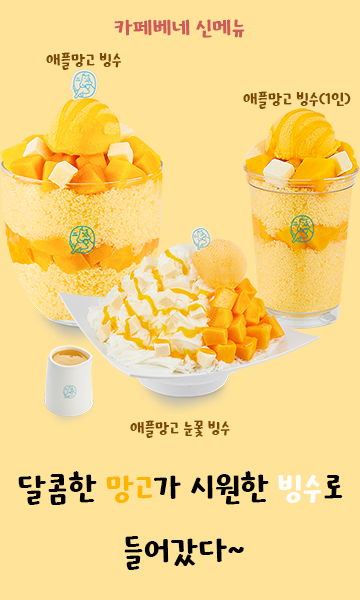
<style>
.page{position:relative;width:360px;height:600px;background:#ffe399}
.page>*{position:absolute;margin:0}
.t1{font:24px "KOTRA-HOPE";color:#ce5a5a}
.t2{font:18px "KOTRA-HOPE";color:#7b4a01}
.t3{font:36px "KOTRA-HOPE";color:#000000}
.t4{font:36px "KOTRA-HOPE";color:#ffb500}
.t5{font:36px "KOTRA-HOPE";color:#ffffff}
</style>
<div class="page">
<p class="t1" style="left:114px;top:19px;width:131px;height:19px">카페베네 신메뉴</p>
<p class="t2" style="left:46px;top:52px;width:75px;height:18px">애플망고 빙수</p>
<p class="t2" style="left:243px;top:91px;width:108px;height:18px">애플망고 빙수(1인)</p>
<p class="t2" style="left:130px;top:420px;width:100px;height:18px">애플망고 눈꽃 빙수</p>
<p class="t3" style="left:18px;top:471px;width:325px;height:99px;text-align:center">달콤한 <span class="t4">망고</span>가 시원한 <span class="t5">빙수</span>로 <br>들어갔다~</p>
</div>
